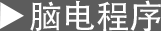
<style>
.page{position:relative;width:161px;height:31px;background:#5c5c5c}
.page>*{position:absolute;margin:0}
.t1{font:33.4px "AdobeHeitiStd-Regular";color:#ffffff}
</style>
<div class="page">
<p class="t1" style="left:30px;top:0px;width:131px;height:32px">脑电程序</p>
</div>
